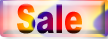
<style>
.page{position:relative;width:108px;height:39px}
.page>*{position:absolute;margin:0}
.t1{font:40px "Arial-Black";scale:0.7 1}
</style>
<div class="page">
<p class="t1" style="left:17px;top:3px;width:65px;height:31px">Sale</p>
</div>
